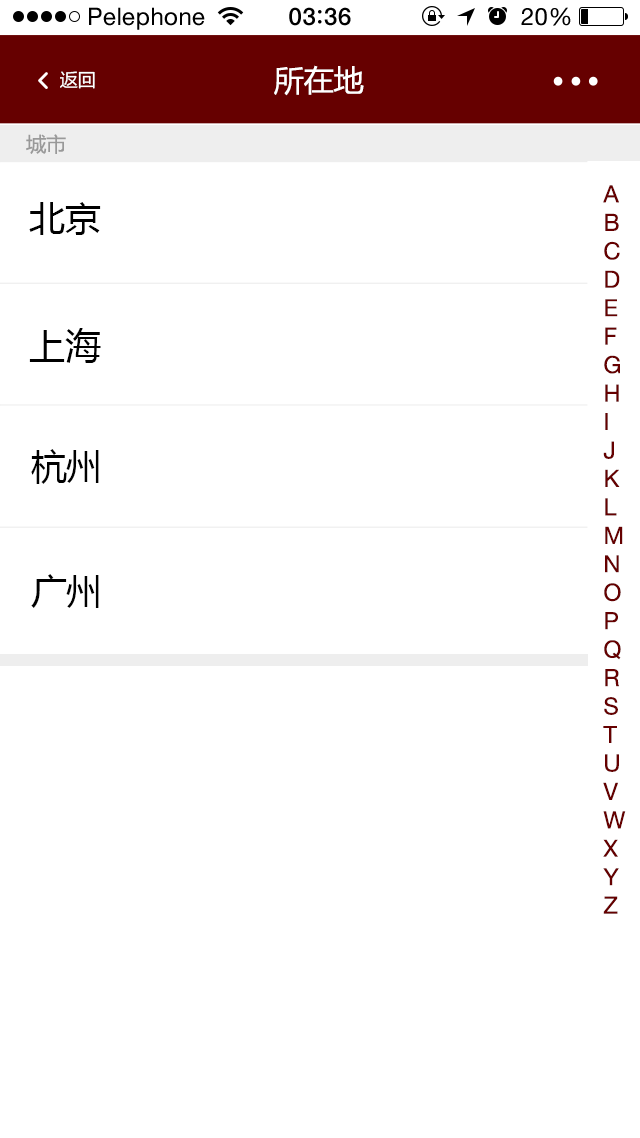
<style>
.page{position:relative;width:640px;height:1138px;background:#ffffff}
.page>*{position:absolute;margin:0}
.t1{font:24px "HelveticaNeue";letter-spacing:0.02em;color:#000000}
.t2{font:24px "HelveticaNeue-Medium";letter-spacing:0.03em;color:#000000}
.t3{font:29.9px "MicrosoftYaHei";color:#ffffff}
.t4{font:18px "MicrosoftYaHei";color:#ffffff}
.t5{font:20px "MicrosoftYaHei";color:#999999}
.t6{font:23.7px/28.4px "HelveticaNeue";color:#660000}
.t7{font:36px "MicrosoftYaHei";color:#000000}
</style>
<div class="page">
<p class="t1" style="left:89px;top:7px;width:116px;height:23px">Pelephone</p>
<p class="t2" style="left:289px;top:7px;width:62px;height:19px">03 36</p>
<p class="t1" style="left:521px;top:7px;width:50px;height:19px">20%</p>
<p class="t3" style="left:274px;top:65px;width:90px;height:31px">所在地</p>
<p class="t4" style="left:60px;top:71px;width:35px;height:18px">返回</p>
<p class="t5" style="left:26px;top:134px;width:40px;height:20px">城市</p>
<p class="t6" style="left:603px;top:185px;width:23px;height:729px">A<br>B<br>C<br>D<br>E<br>F<br>G<br>H<br>I<br>J<br>K<br>L<br>M<br>N<br>O<br>P<br>Q<br>R<br>S<br>T<br>U<br>V<br>W<br>X<br>Y<br>Z</p>
<p class="t7" style="left:29px;top:202px;width:72px;height:33px">北京</p>
<p class="t7" style="left:29px;top:328px;width:72px;height:35px">上海</p>
<p class="t7" style="left:31px;top:449px;width:68px;height:35px">杭州</p>
<p class="t7" style="left:31px;top:574px;width:68px;height:34px">广州</p>
</div>
